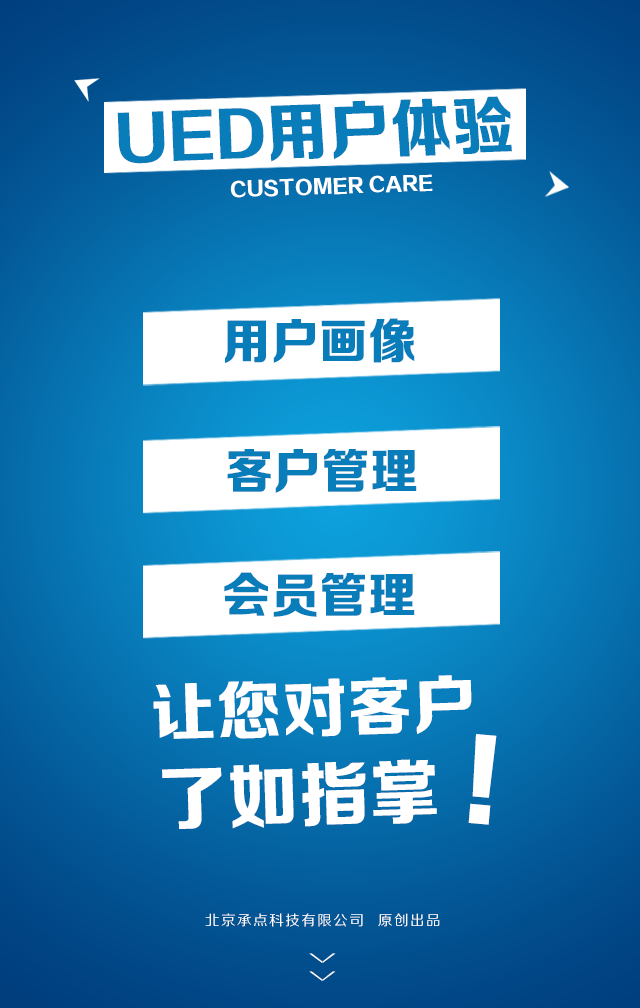
<style>
.page{position:relative;width:640px;height:1008px}
.page>*{position:absolute;margin:0}
.t1{font:63.7px "FZZDHJW--GB1-0";letter-spacing:0.005em;color:#087dba;text-transform:uppercase}
.t2{font:59.7px "FZZDHJW--GB1-0";letter-spacing:0.005em;color:#087dba;text-transform:uppercase}
.t3{font:19.2px "FZZDHJW--GB1-0";letter-spacing:0.005em;color:#ffffff;text-transform:uppercase}
.t4{font:48.8px "FZZDHJW--GB1-0";letter-spacing:0.005em;color:#087dba;text-transform:uppercase}
.t5{font:64.6px "FZZDHJW--GB1-0";letter-spacing:0.005em;color:#ffffff;text-transform:uppercase}
.t6{font:105.4px "FZZDHJW--GB1-0";letter-spacing:0.005em;color:#ffffff;text-transform:uppercase}
.t7{font:70.5px "FZZDHJW--GB1-0";letter-spacing:0.005em;color:#ffffff;text-transform:uppercase}
.t8{font:14.2px "FZZHJW--GB1-0";letter-spacing:0.1em;color:#ffffff;text-transform:uppercase}
.t9{font:36.8px "FZZXHJW--GB1-0";letter-spacing:0.5em;color:#ffffff;text-transform:uppercase;scale:0.44 1}
</style>
<div class="page">
<p class="t1" style="left:270px;top:96px;width:242px;height:66px;rotate:-2deg">用户体验</p>
<p class="t2" style="left:117px;top:108px;width:147px;height:56px;rotate:-2deg">UED</p>
<p class="t3" style="left:230px;top:174px;width:203px;height:24px;rotate:-2deg">customer care</p>
<p class="t4" style="left:225px;top:318px;width:190px;height:45px">用户画像</p>
<p class="t4" style="left:227px;top:449px;width:190px;height:44px">客户管理</p>
<p class="t4" style="left:224px;top:572px;width:191px;height:45px">会员管理</p>
<p class="t5" style="left:153px;top:675px;width:319px;height:64px;rotate:-2deg">让您对客户</p>
<p class="t6" style="left:468px;top:734px;width:29px;height:91px;rotate:5deg">！</p>
<p class="t7" style="left:162px;top:759px;width:275px;height:70px;rotate:-2deg">了如指掌</p>
<p class="t8" style="left:205px;top:913px;width:235px;height:14px">北京承点科技有限公司  原创出品</p>
<p class="t9" style="left:309px;top:953px;width:27px;height:28px;rotate:90deg">&gt;&gt;</p>
</div>
